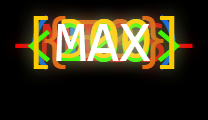
<style>
.page{position:relative;width:208px;height:120px;background:#000000}
.page>*{position:absolute;margin:0}
.t1{font:58px "Consolas"}
.t2{font:58px "Consolas";color:#ffffff}
</style>
<div class="page">
<p class="t1" style="left:32px;top:15px;width:144px;height:55px">(100)</p>
<p class="t1" style="left:33px;top:16px;width:142px;height:53px">[300]</p>
<p class="t1" style="left:44px;top:16px;width:120px;height:53px">{50}</p>
<p class="t1" style="left:28px;top:23px;width:152px;height:39px">&lt;200&gt;</p>
<p class="t2" style="left:56px;top:24px;width:95px;height:37px">MAX</p>
</div>
